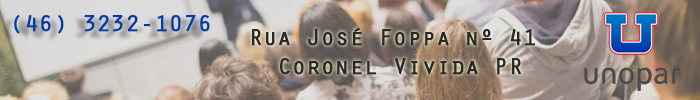
<style>
.page{position:relative;width:700px;height:100px}
.page>*{position:absolute;margin:0}
.t1{font:24px "OratorStd";letter-spacing:-0.025em;color:#003cac;font-weight:bold}
.t2{font:24px/29.3px "OratorStd";letter-spacing:-0.025em;color:#292828;font-weight:bold}
</style>
<div class="page">
<p class="t1" style="left:14px;top:15px;width:196px;height:19px">(46) 3232-1076</p>
<p class="t2" style="left:252px;top:27px;width:283px;height:48px;text-align:center">Rua José Foppa nº 41 <br>Coronel Vivida PR</p>
</div>
